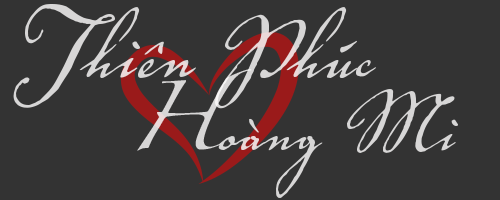
<style>
.page{position:relative;width:500px;height:200px;background:#333333}
.page>*{position:absolute;margin:0}
.t1{font:133.3px "VolutaScriptPro-Regular";color:#d7d6d6}
.t2{font:112.3px "VolutaScriptPro-Regular";color:#d7d6d6}
.t3{font:62.4px "Zapfino";color:#d7d6d6}
</style>
<div class="page">
<p class="t1" style="left:13px;top:4px;width:364px;height:105px">Thiên Phúc</p>
<p class="t2" style="left:137px;top:69px;width:321px;height:129px"><span class="t3">H</span>oàng Mi</p>
</div>
